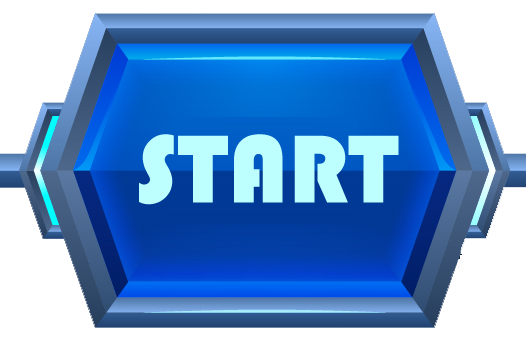
<style>
.page{position:relative;width:526px;height:350px;background:#ffffff}
.page>*{position:absolute;margin:0}
.t1{font:100px "Bauhaus93";color:#bdfffe}
</style>
<div class="page">
<p class="t1" style="left:139px;top:134px;width:260px;height:71px">START</p>
</div>
